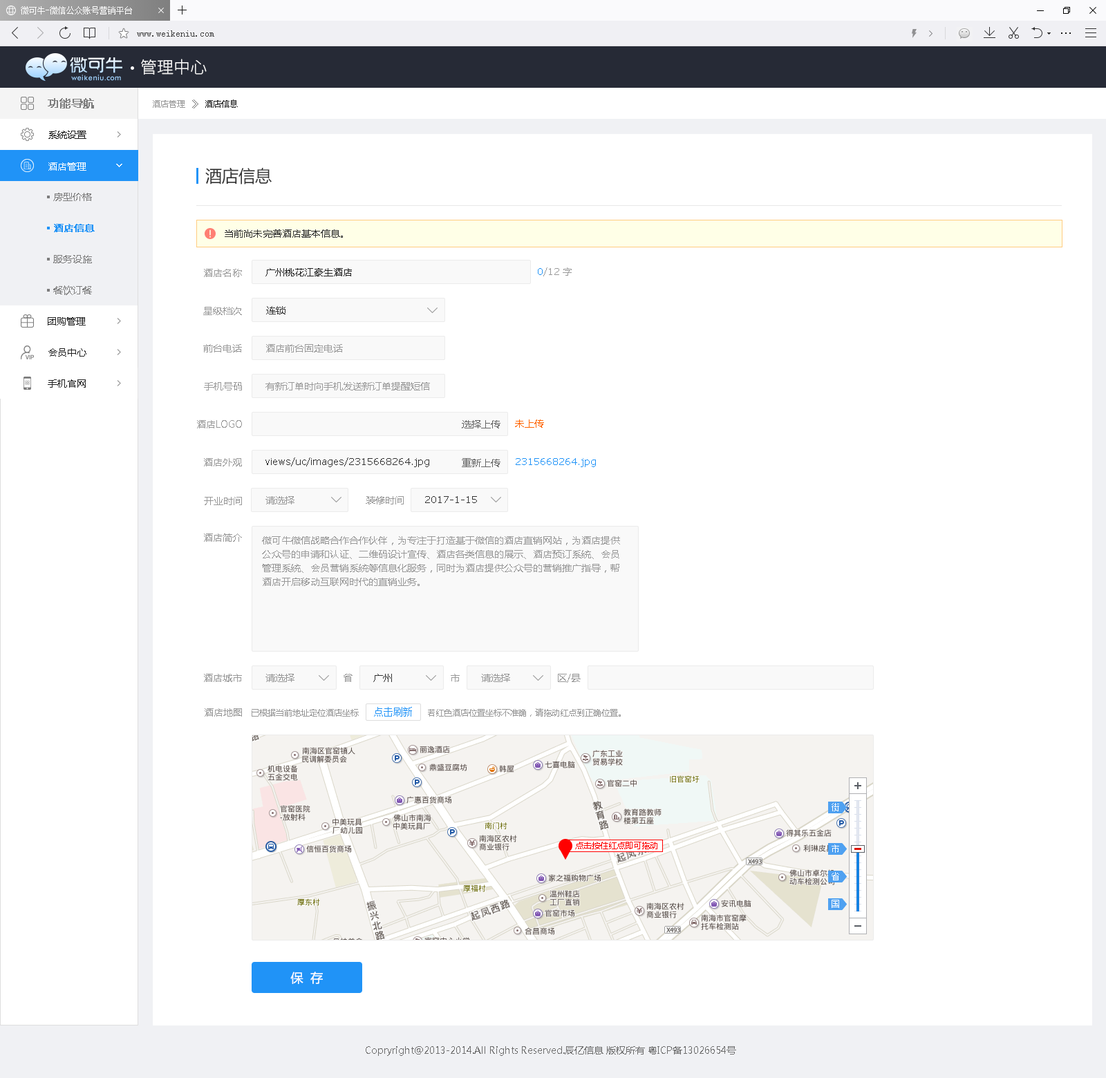
<style>
.page{position:relative;width:1106px;height:1078px;background:#ffffff}
.page>*{position:absolute;margin:0}
.t1{font:16.6px "SourceHanSansCN-Light";color:#e1e1e1}
.t2{font:11.1px "MicrosoftYaHei";color:#7d7d7d;font-weight:bold}
.t3{font:8.3px "MicrosoftYaHei";color:#999999}
.t4{font:9.7px "SimSun";color:#666666}
.t5{font:8.3px "MicrosoftYaHei";color:#222222}
.t6{font:9.7px "MicrosoftYaHei";color:#222222}
.t7{font:9.7px "MicrosoftYaHei";color:#fefefe}
.t8{font:16.6px "MicrosoftYaHei";color:#333333}
.t9{font:9.7px "MicrosoftYaHei";color:#7d7d7d}
.t10{font:9.7px "MicrosoftYaHei";color:#2093f7;font-weight:bold}
.t11{font:9.7px "MicrosoftYaHei";color:#333333}
.t12{font:9.7px "MicrosoftYaHei";color:#999999}
.t13{font:9.7px "Verdana";color:#999999}
.t14{font:9.7px "Verdana";color:#2093f7}
.t15{font:9.7px "MicrosoftYaHei";color:#666666}
.t16{font:9.7px "MicrosoftYaHei";color:#ff6600}
.t17{font:9.7px "Verdana";color:#333333}
.t18{font:9.7px/13.8px "MicrosoftYaHei";color:#999999}
.t19{font:9.7px "SimSun";color:#2093f7}
.t20{font:8.3px "MicrosoftYaHei";color:#ff0000}
.t21{font:12.4px "MicrosoftYaHei";color:#ffffff}
.t22{font:9.7px "MicrosoftYaHei";color:#6f6f6f}
</style>
<div class="page">
<p class="t1" style="left:141px;top:59px;width:66px;height:16px">管理中心</p>
<p class="t2" style="left:48px;top:98px;width:46px;height:11px">功能导航</p>
<p class="t3" style="left:153px;top:100px;width:32px;height:8px">酒店管理</p>
<p class="t4" style="left:192px;top:100px;width:6px;height:9px">》</p>
<p class="t5" style="left:205px;top:100px;width:33px;height:8px">酒店信息</p>
<p class="t6" style="left:48px;top:131px;width:38px;height:8px">系统设置</p>
<p class="t7" style="left:48px;top:162px;width:38px;height:9px">酒店管理</p>
<p class="t8" style="left:205px;top:167px;width:67px;height:18px">酒店信息</p>
<p class="t9" style="left:53px;top:193px;width:39px;height:8px">房型价格</p>
<p class="t10" style="left:54px;top:224px;width:41px;height:8px">酒店信息</p>
<p class="t11" style="left:225px;top:229px;width:118px;height:9px">当前尚未完善酒店基本信息。</p>
<p class="t9" style="left:53px;top:255px;width:39px;height:8px">服务设施</p>
<p class="t12" style="left:204px;top:269px;width:38px;height:8px">酒店名称</p>
<p class="t6" style="left:265px;top:268px;width:87px;height:8px">广州桃花江豪生酒店</p>
<p class="t13" style="left:538px;top:267px;width:21px;height:9px"><span class="t14">0</span>/12</p>
<p class="t12" style="left:563px;top:267px;width:9px;height:9px">字</p>
<p class="t9" style="left:53px;top:285px;width:39px;height:10px">餐饮订餐</p>
<p class="t6" style="left:48px;top:317px;width:38px;height:9px">团购管理</p>
<p class="t12" style="left:203px;top:307px;width:39px;height:8px">星级档次</p>
<p class="t11" style="left:266px;top:306px;width:19px;height:8px">连锁</p>
<p class="t6" style="left:48px;top:348px;width:38px;height:9px">会员中心</p>
<p class="t12" style="left:203px;top:344px;width:39px;height:9px">前台电话</p>
<p class="t12" style="left:266px;top:344px;width:77px;height:9px">酒店前台固定电话</p>
<p class="t6" style="left:48px;top:379px;width:38px;height:9px">手机官网</p>
<p class="t12" style="left:204px;top:382px;width:38px;height:9px">手机号码</p>
<p class="t12" style="left:265px;top:382px;width:165px;height:9px">有新订单时向手机发送新订单提醒短信</p>
<p class="t12" style="left:197px;top:420px;width:45px;height:9px">酒店LOGO</p>
<p class="t15" style="left:462px;top:420px;width:38px;height:9px">选择上传</p>
<p class="t16" style="left:515px;top:420px;width:29px;height:8px">未上传</p>
<p class="t12" style="left:204px;top:458px;width:38px;height:9px">酒店外观</p>
<p class="t17" style="left:265px;top:458px;width:164px;height:9px">views/uc/images/2315668264.jpg</p>
<p class="t15" style="left:462px;top:458px;width:38px;height:9px">重新上传</p>
<p class="t14" style="left:516px;top:458px;width:80px;height:9px">2315668264.jpg</p>
<p class="t12" style="left:204px;top:497px;width:38px;height:8px">开业时间</p>
<p class="t12" style="left:265px;top:496px;width:29px;height:9px">请选择</p>
<p class="t12" style="left:366px;top:496px;width:38px;height:9px">装修时间</p>
<p class="t17" style="left:425px;top:496px;width:52px;height:7px">2017-1-15</p>
<p class="t12" style="left:204px;top:534px;width:38px;height:8px">酒店简介</p>
<p class="t18" style="left:262px;top:536px;width:358px;height:50px">微可牛微信战略合作合作伙伴，为专注于打造基于微信的酒店直销网站，为酒店提供公众号的申请和认证、二维码设计宣传、酒店各类信息的展示、酒店预订系统、会员管理系统、会员营销系统等信息化服务，同时为酒店提供公众号的营销推广指导，帮酒店开启移动互联网时代的直销业务。</p>
<p class="t12" style="left:204px;top:674px;width:38px;height:8px">酒店城市</p>
<p class="t12" style="left:265px;top:674px;width:29px;height:8px">请选择</p>
<p class="t12" style="left:344px;top:674px;width:9px;height:8px">省</p>
<p class="t11" style="left:373px;top:674px;width:19px;height:8px">广州</p>
<p class="t12" style="left:451px;top:674px;width:9px;height:8px">市</p>
<p class="t12" style="left:481px;top:674px;width:29px;height:8px">请选择</p>
<p class="t12" style="left:558px;top:674px;width:23px;height:9px">区/县</p>
<p class="t12" style="left:205px;top:708px;width:37px;height:9px">酒店地图</p>
<p class="t3" style="left:252px;top:709px;width:107px;height:8px">已根据当前地址定位酒店坐标</p>
<p class="t19" style="left:374px;top:707px;width:38px;height:10px">点击刷新</p>
<p class="t3" style="left:428px;top:708px;width:193px;height:9px">若红色酒店位置坐标不准确，请拖动红点到正确位置。</p>
<p class="t20" style="left:575px;top:842px;width:82px;height:7px">点击按住红点即可拖动</p>
<p class="t21" style="left:290px;top:972px;width:33px;height:12px">保  存</p>
<p class="t22" style="left:366px;top:1046px;width:370px;height:10px">Copryright@2013-2014.All Rights Reserved.辰亿信息 版权所有 粤ICP备13026654号</p>
</div>
